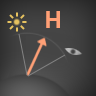
<style>
.page{position:relative;width:96px;height:96px}
.page>*{position:absolute;margin:0}
.t1{font:24px "Arial-BoldMT";color:#ffa076}
</style>
<div class="page">
<p class="t1" style="left:46px;top:11px;width:14px;height:17px">H</p>
</div>
